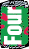
<style>
.page{position:relative;width:29px;height:49px;background:#139a49}
.page>*{position:absolute;margin:0}
.t1{font:24px "HelveticaInserat-Roman-SemiB";letter-spacing:-0.01em;color:#ffffff}
</style>
<div class="page">
<p class="t1" style="left:4px;top:7px;width:18px;height:38px;rotate:-90deg">Four</p>
</div>
